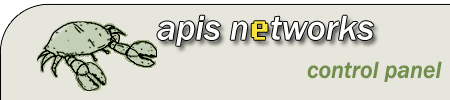
<style>
.page{position:relative;width:450px;height:100px;background:#e6e6dc}
.page>*{position:absolute;margin:0}
.t1{font:36px "FranklinGothic-MediumItalic";color:#ffffff}
.t2{font:34px "Fixedsys";color:#f9e43f}
.t3{font:24px "FranklinGothic-MediumItalic";color:#718e4d}
</style>
<div class="page">
<p class="t1" style="left:157px;top:15px;width:217px;height:31px">apis n<span class="t2">e</span>tworks</p>
<p class="t3" style="left:307px;top:61px;width:135px;height:21px">control panel</p>
</div>
